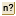
<style>
.page{position:relative;width:16px;height:16px;background:#efe6ce}
.page>*{position:absolute;margin:0}
.t1{font:9px "ArialMT";letter-spacing:0.025em;color:#000000}
</style>
<div class="page">
<p class="t1" style="left:3px;top:4px;width:11px;height:7px">n?</p>
</div>
